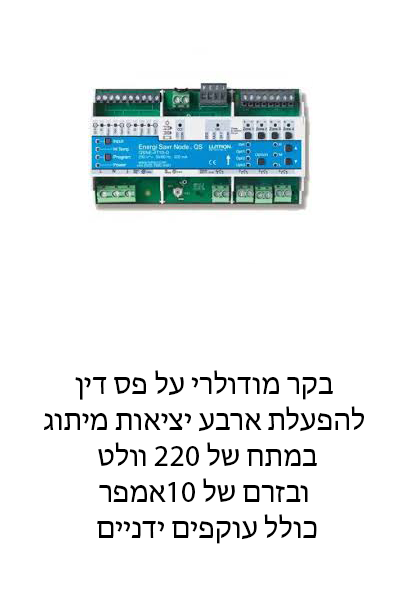
<style>
.page{position:relative;width:400px;height:600px;background:#ffffff}
.page>*{position:absolute;margin:0}
.t1{font:30px "MyriadHebrew-Regular";color:#000000}
</style>
<div class="page">
<p class="t1" style="left:44px;top:370px;width:320px;height:174px;text-align:center">בקר מודולרי על פס דין<br>להפעלת ארבע יציאות מיתוג<br> במתח של 220 וולט<br>ובזרם של 10אמפר<br> כולל עוקפים ידניים</p>
</div>
